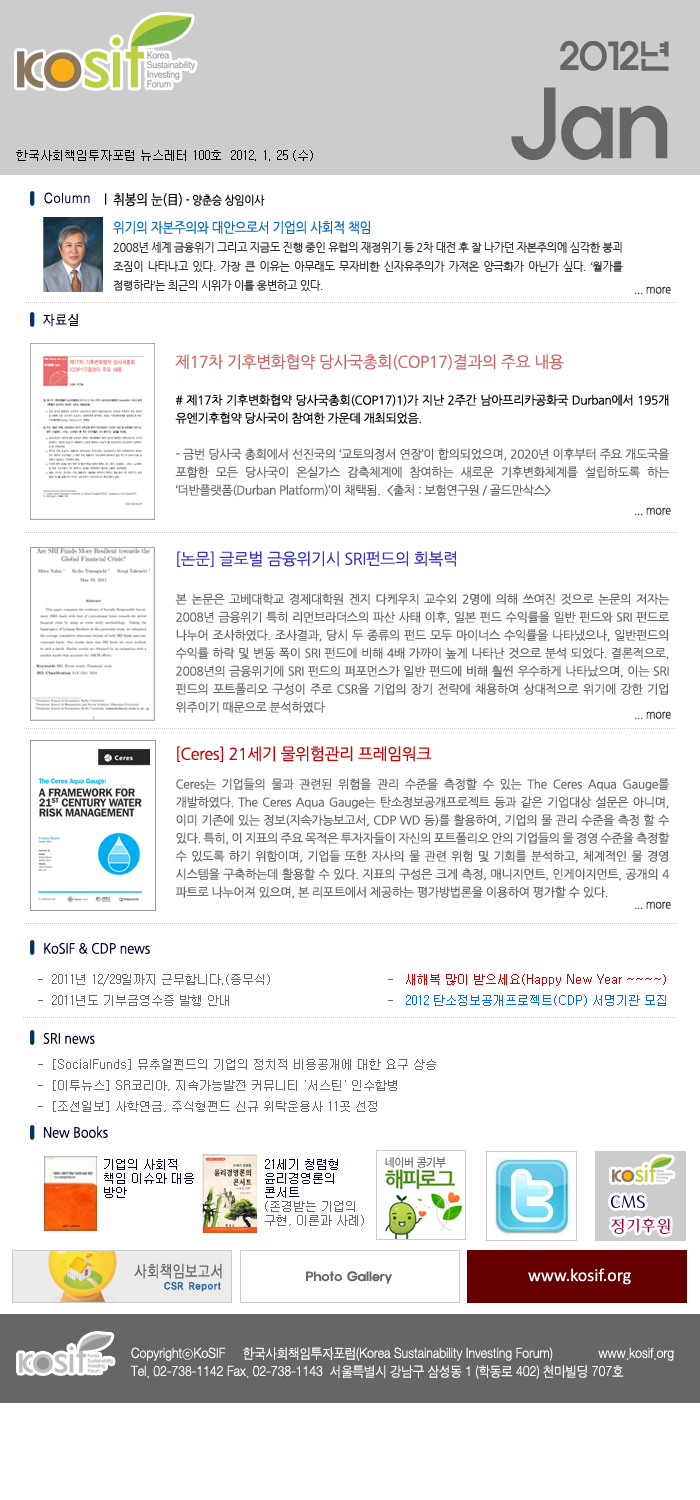
<style>
.page{position:relative;width:700px;height:1500px;background:#ffffff}
.page>*{position:absolute;margin:0}
.t1{font:36.1px/41.9px "ExpoM-HM";color:#666666;scale:0.89 1}
.t2{font:90.2px/41.9px "ExpoM-HM";color:#666666;scale:0.89 1}
.t3{font:12px "Gulim";color:#000000}
.t4{font:14px "H2gtrM";color:#000033;scale:0.9 1}
.t5{font:14px "NanumGothic";letter-spacing:-0.025em;color:#000000;scale:0.9 1}
.t6{font:12px "NanumGothic";letter-spacing:-0.025em;color:#000000;scale:0.9 1}
.t7{font:14px "NanumGothic";letter-spacing:-0.025em;color:#0066cc;scale:0.9 1}
.t8{font:11px "NanumGothic";letter-spacing:-0.025em;color:#333333}
.t9{font:12px "NanumGothic";letter-spacing:-0.025em;color:#333333;scale:0.9 1}
.t10{font:16px "NanumGothic";letter-spacing:-0.025em;color:#cc6666}
.t11{font:12px/18px "NanumGothic";letter-spacing:-0.025em;color:#666666}
.t12{font:12px/18px "NanumGothic";letter-spacing:-0.025em;color:#000000}
.t13{font:16px "NanumGothic";letter-spacing:-0.025em;color:#3333cc}
.t14{font:16px "NanumGothic";letter-spacing:-0.025em;color:#cc0000}
.t15{font:14px "NanumGothic";color:#000033;scale:0.9 1}
.t16{font:12px "Gulim";color:#666666}
.t17{font:12px "Gulim";color:#cc0000}
.t18{font:12px "Gulim";color:#0066ff}
.t19{font:12px/14px "Gulim";color:#000033}
.t20{font:12px/14px "Gulim";color:#666666}
</style>
<div class="page">
<p class="t1" style="left:511px;top:40px;width:158px;height:120px;text-align:right">2012년<br><span class="t2">Jan</span></p>
<p class="t3" style="left:16px;top:150px;width:297px;height:11px">한국사회책임투자포럼 뉴스레터 100호  2012. 1. 25 (수)</p>
<p class="t4" style="left:44px;top:192px;width:46px;height:12px">Column</p>
<p class="t5" style="left:105px;top:193px;width:160px;height:14px">l  취봉의 눈(目) <span class="t6">- 양춘승 상임이사</span></p>
<p class="t7" style="left:113px;top:221px;width:257px;height:14px">위기의 자본주의와 대안으로서 기업의 사회적 책임</p>
<p class="t8" style="left:113px;top:242px;width:510px;height:49px;text-align:justify">2008년 세계 금융위기 그리고 지금도 진행 중인 유럽의 재정위기 등 2차 대전 후 잘 나가던 자본주의에 심각한 붕괴 조짐이 나타나고 있다. 가장 큰 이유는 아무래도 무자비한 신자유주의가 가져온 양극화가 아닌가 싶다. ‘월가를 점령하라’는 최근의 시위가 이를 웅변하고 있다.</p>
<p class="t9" style="left:635px;top:286px;width:36px;height:9px">... more</p>
<p class="t4" style="left:43px;top:313px;width:35px;height:14px">자료실</p>
<p class="t10" style="left:175px;top:354px;width:389px;height:16px">제17차 기후변화협약 당사국총회(COP17)결과의 주요 내용</p>
<p class="t11" style="left:175px;top:394px;width:495px;height:103px;text-align:justify"><span class="t12"># 제17차 기후변화협약 당사국총회(COP17)1)가 지난 2주간 남아프리카공화국 Durban에서 195개 유엔기후협약 당사국이 참여한 가운데 개최되었음.<br></span><br>- 금번 당사국 총회에서 선진국의 ‘교토의정서 연장’이 합의되었으며, 2020년 이후부터 주요 개도국을 포함한 모든 당사국이 온실가스 감축체계에 참여하는 새로운 기후변화체계를 설립하도록 하는 ‘더반플랫폼(Durban Platform)’이 채택됨.  &lt;출처 : 보험연구원 / 골드만삭스&gt;</p>
<p class="t9" style="left:635px;top:507px;width:36px;height:9px">... more</p>
<p class="t13" style="left:177px;top:551px;width:279px;height:16px">[논문] 글로벌 금융위기시 SRI펀드의 회복력</p>
<p class="t11" style="left:175px;top:593px;width:495px;height:120px;text-align:justify">본 논문은 고베대학교 경제대학원 겐지 다케우치 교수외 2명에 의해 쓰여진 것으로 논문의 저자는 2008년 금융위기 특히 리먼브라더스의 파산 사태 이후, 일본 펀드 수익률을 일반 펀드와 SRI 펀드로 나누어 조사하였다. 조사결과, 당시 두 종류의 펀드 모두 마이너스 수익률을 나타냈으나, 일반펀드의 수익률 하락 및 변동 폭이 SRI 펀드에 비해 4배 가까이 높게 나타난 것으로 분석 되었다. 결론적으로, 2008년의 금융위기에 SRI 펀드의 퍼포먼스가 일반 펀드에 비해 훨씬 우수하게 나타났으며, 이는 SRI 펀드의 포트폴리오 구성이 주로 CSR을 기업의 장기 전략에 채용하여 상대적으로 위기에 강한 기업 위주이기 때문으로 분석하였다</p>
<p class="t9" style="left:635px;top:711px;width:36px;height:9px">... more</p>
<p class="t14" style="left:177px;top:746px;width:255px;height:16px">[Ceres] 21세기 물위험관리 프레임워크</p>
<p class="t11" style="left:175px;top:778px;width:495px;height:121px;text-align:justify">Ceres는 기업들의 물과 관련된 위험을 관리 수준을 측정할 수 있는 The Ceres Aqua Gauge를 개발하였다. The Ceres Aqua Gauge는 탄소정보공개프로젝트 등과 같은 기업대상 설문은 아니며, 이미 기존에 있는 정보(지속가능보고서, CDP WD 등)를 활용하여, 기업의 물 관리 수준을 측정 할 수 있다. 특히, 이 지표의 주요 목적은 투자자들이 자신의 포트폴리오 안의 기업들의 물 경영 수준을 측정할 수 있도록 하기 위함이며, 기업들 또한 자사의 물 관련 위험 및 기회를 분석하고, 체계적인 물 경영 시스템을 구축하는데 활용할 수 있다. 지표의 구성은 크게 측정, 매니지먼트, 인게이지먼트, 공개의 4 파트로 나누어져 있으며, 본 리포트에서 제공하는 평가방법론을 이용하여 평가할 수 있다.</p>
<p class="t9" style="left:635px;top:901px;width:36px;height:9px">... more</p>
<p class="t15" style="left:44px;top:942px;width:106px;height:12px">KoSIF &amp; CDP news</p>
<p class="t16" style="left:38px;top:974px;width:628px;height:32px">-  2011년 12/29일까지 근무합니다.(종무식)                             -   <span class="t17">새해복 많이 받으세요(Happy New Year ~~~~)<br></span>-  2011년도 기부금영수증 발행 안내                                       -   <span class="t18">2012 탄소정보공개프로젝트(CDP) 서명기관 모집</span></p>
<p class="t15" style="left:43px;top:1033px;width:52px;height:11px">SRI news</p>
<p class="t16" style="left:38px;top:1059px;width:398px;height:53px">-  [SocialFunds] 뮤추얼펀드의 기업의 정치적 비용공개에 대한 요구 상승<br>-  [이투뉴스] SR코리아, 지속가능발전 커뮤니티 '서스틴' 인수합병<br>-  [조선일보] 사학연금, 주식형펀드 신규 위탁운용사 11곳 선정</p>
<p class="t15" style="left:44px;top:1126px;width:64px;height:12px">New Books</p>
<p class="t19" style="left:104px;top:1159px;width:90px;height:39px">기업의 사회적 책임 이슈와 대응 방안</p>
<p class="t20" style="left:265px;top:1159px;width:99px;height:67px"><span class="t19">21세기 청렴형 윤리경영론의 콘서트<br></span>(존경받는 기업의 구현, 이론과 사례)</p>
</div>
